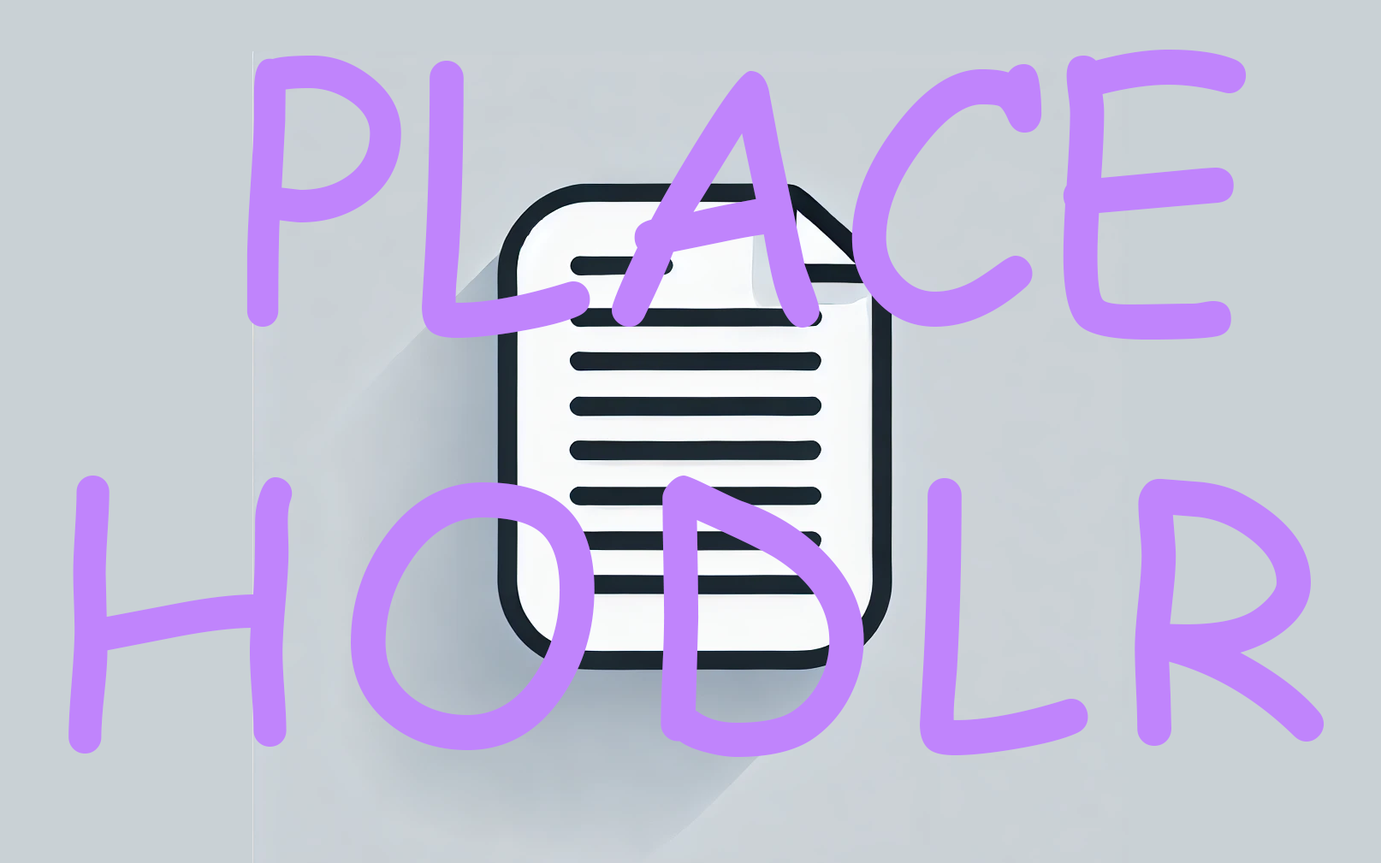
<style>
.page{position:relative;width:1381px;height:863px;background:#c9d1d5}
.page>*{position:absolute;margin:0}
.t1{font:348.3px "ComicSansMS";letter-spacing:-0.02em;color:#c084fc}
.t2{font:348.3px "ComicSansMS";color:#c084fc}
.t3{font:348.3px "ComicSansMS";letter-spacing:0.06em;color:#c084fc}
</style>
<div class="page">
<p class="t1" style="left:68px;top:50px;width:1257px;height:707px"><span class="t2">  </span>PLACE       <span class="t3">HODLR</span></p>
</div>
